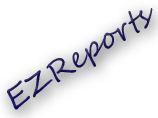
<style>
.page{position:relative;width:158px;height:118px;background:#ffffff}
.page>*{position:absolute;margin:0}
.t1{font:30px "SegoeScript"}
</style>
<div class="page">
<p class="t1" style="left:7px;top:8px;width:146px;height:102px;rotate:-33deg">EZReports</p>
</div>
